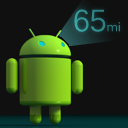
<style>
.page{position:relative;width:128px;height:128px;background:#101010}
.page>*{position:absolute;margin:0}
.t1{font:30px "Kalinga";color:#2e7d7f}
.t2{font:12px "Kalinga";color:#2e7d7f}
</style>
<div class="page">
<p class="t1" style="left:74px;top:9px;width:46px;height:23px">65<span class="t2">mi</span></p>
</div>
